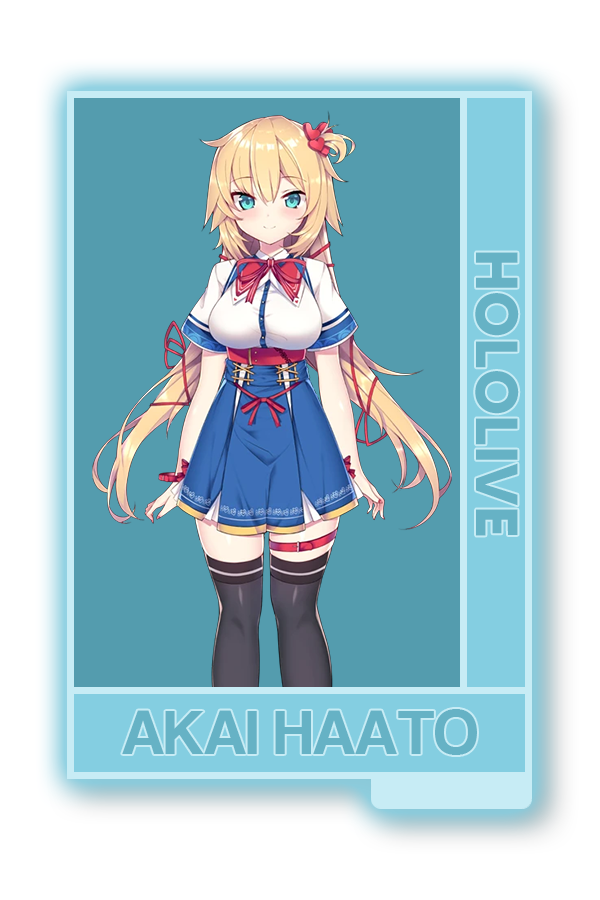
<style>
.page{position:relative;width:600px;height:900px;background:#549cae}
.page>*{position:absolute;margin:0}
.t1{font:59.2px "MADETOMMY-Bold";color:#66b2c5}
.t2{font:65.8px "CoolveticaRg-Regular";color:#66b2c5}
</style>
<div class="page">
<p class="t1" style="left:475px;top:252px;width:44px;height:284px;rotate:90deg">HOLOLIVE</p>
<p class="t2" style="left:122px;top:709px;width:355px;height:46px">AKAI HAATO</p>
</div>
